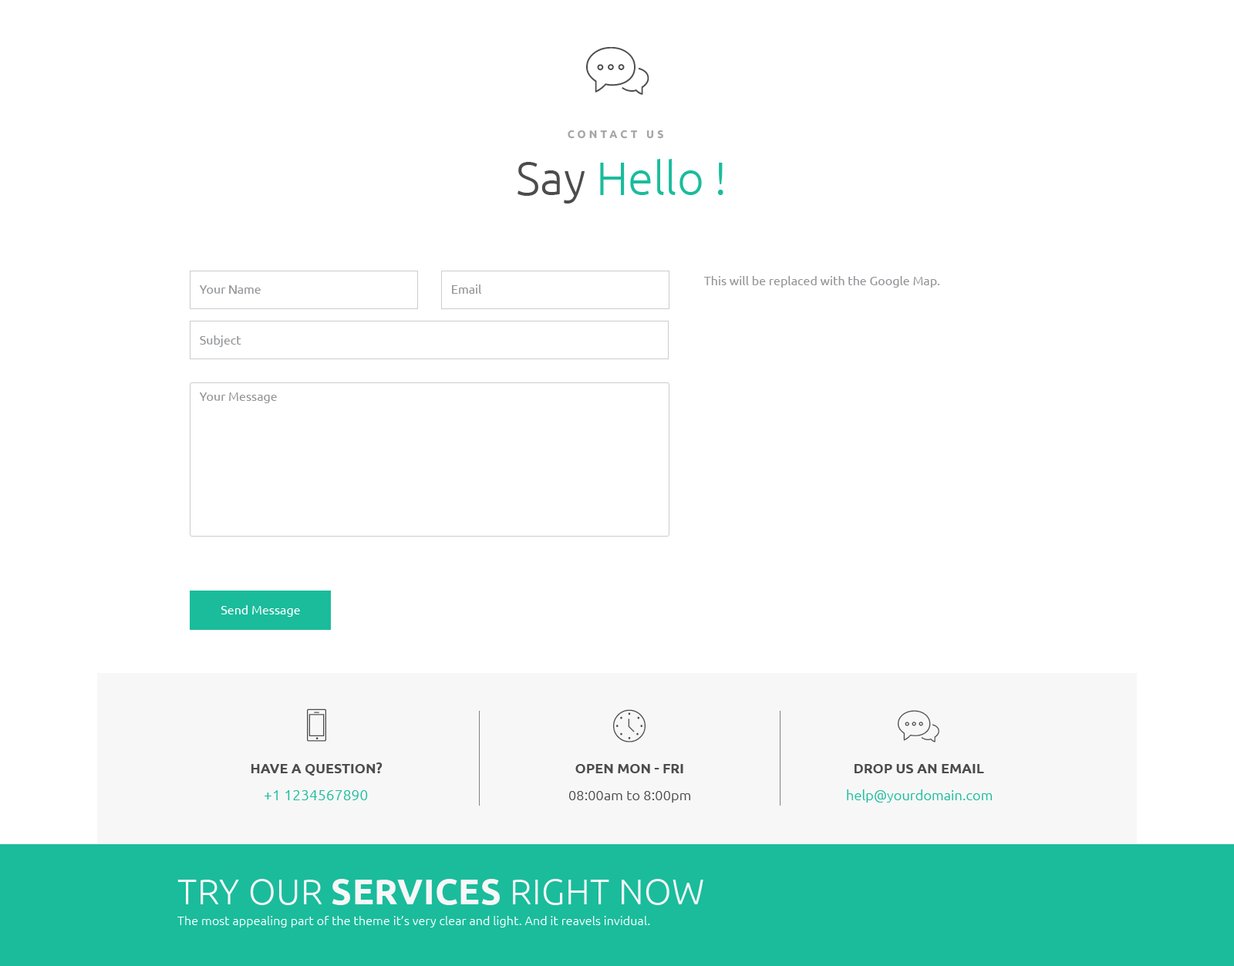
<style>
.page{position:relative;width:1234px;height:966px;background:#ffffff}
.page>*{position:absolute;margin:0}
.t1{font:10.8px "Ubuntu-Bold";letter-spacing:0.3em;color:#a5a5a5;text-transform:uppercase}
.t2{font:46.3px "Ubuntu-Light";color:#1abc9c}
.t3{font:46.3px "Ubuntu-Light";color:#4c4c4c}
.t4{font:12.3px "Ubuntu";color:#939598}
.t5{font:12.3px "Ubuntu";color:#ffffff}
.t6{font:13.9px "Ubuntu-Bold";color:#4c4c4c}
.t7{font:13.9px "Ubuntu-Bold";color:#4c4c4c;text-transform:uppercase}
.t8{font:14.7px "Ubuntu-Light";letter-spacing:0.01em;color:#1abc9c}
.t9{font:13.9px "Ubuntu-Light";letter-spacing:0.01em;color:#4c4c4c}
.t10{font:13.9px "Ubuntu-Light";letter-spacing:0.01em;color:#1abc9c}
.t11{font:12.3px/20.8px "Ubuntu-Light";letter-spacing:0.01em;color:#ffffff}
.t12{font:35.5px/51.7px "Ubuntu-Light";letter-spacing:0.01em;color:#f7f7f7}
.t13{font:35.5px/51.7px "Ubuntu-Bold";letter-spacing:0.01em;color:#f7f7f7}
</style>
<div class="page">
<p class="t1" style="left:568px;top:130px;width:95px;height:9px">contact us</p>
<p class="t2" style="left:517px;top:159px;width:206px;height:45px"><span class="t3"> Say </span>Hello !</p>
<p class="t4" style="left:703px;top:276px;width:236px;height:12px">This will be replaced with the Google Map.</p>
<p class="t4" style="left:200px;top:285px;width:61px;height:9px">Your Name</p>
<p class="t4" style="left:452px;top:285px;width:29px;height:9px">Email</p>
<p class="t4" style="left:200px;top:335px;width:41px;height:12px">Subject</p>
<p class="t4" style="left:200px;top:393px;width:77px;height:10px">Your Message</p>
<p class="t5" style="left:221px;top:605px;width:79px;height:12px">Send Message</p>
<p class="t6" style="left:251px;top:763px;width:132px;height:13px">HAVE A QUESTION?</p>
<p class="t7" style="left:575px;top:764px;width:108px;height:10px">Open Mon - Fri</p>
<p class="t7" style="left:855px;top:764px;width:129px;height:10px">Drop us an email</p>
<p class="t8" style="left:265px;top:791px;width:103px;height:10px">+1 1234567890</p>
<p class="t9" style="left:569px;top:791px;width:121px;height:12px">08:00am to 8:00pm</p>
<p class="t10" style="left:847px;top:790px;width:145px;height:13px">help@yourdomain.com</p>
<p class="t11" style="left:177px;top:879px;width:526px;height:49px"><span class="t12">TRY OUR </span><span class="t13">SERVICES </span><span class="t12">RIGHT NOW<br></span>The most appealing part of the theme it’s very clear and light. And it reavels invidual.</p>
</div>
